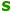
<style>
.page{position:relative;width:12px;height:12px;background:#208e0e}
.page>*{position:absolute;margin:0}
.t1{font:13px "Verdana-Bold";color:#208e0e}
</style>
<div class="page">
<p class="t1" style="left:2px;top:1px;width:9px;height:10px">S</p>
</div>
